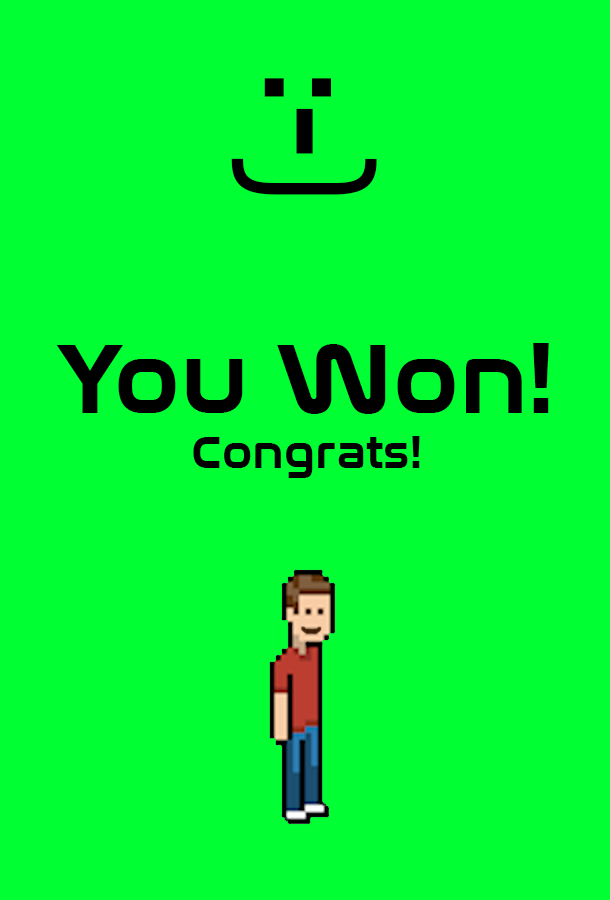
<style>
.page{position:relative;width:610px;height:900px;background:#00ff33}
.page>*{position:absolute;margin:0}
.t1{font:125px "NasalizationRg-Bold";color:#000000}
.t2{font:100px "NasalizationRg-Bold";color:#000000}
.t3{font:45.8px "NasalizationRg-Bold";color:#000000}
</style>
<div class="page">
<p class="t1" style="left:231px;top:78px;width:146px;height:117px;rotate:90deg">:-)</p>
<p class="t2" style="left:56px;top:343px;width:493px;height:71px">You Won!</p>
<p class="t3" style="left:193px;top:436px;width:227px;height:42px">Congrats!</p>
</div>
